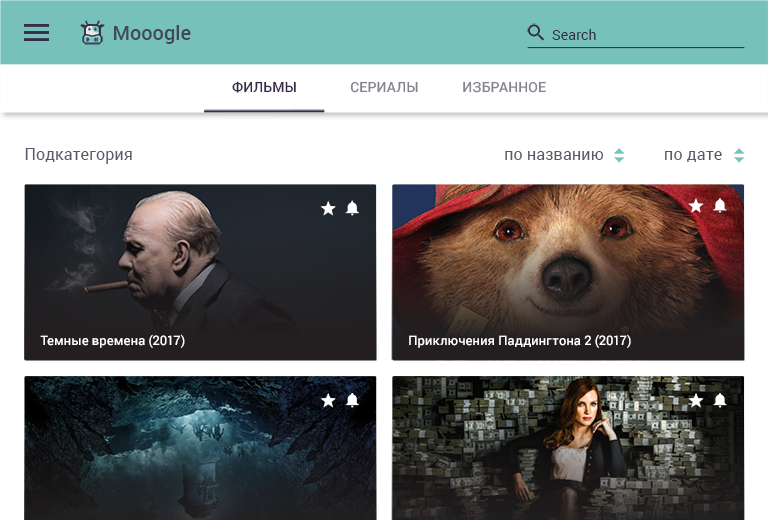
<style>
.page{position:relative;width:768px;height:520px;background:#ffffff}
.page>*{position:absolute;margin:0}
.t1{font:20px "Roboto-Medium";letter-spacing:0.005em;color:#41485b}
.t2{font:14px "Roboto-Regular";letter-spacing:0.01em;color:#372c48}
.t3{font:14px "Roboto-Medium";letter-spacing:0.01em;color:#372c48;text-transform:uppercase}
.t4{font:14px "Roboto-Medium";letter-spacing:0.01em;color:#86828e;text-transform:uppercase}
.t5{font:16px "Roboto-Regular";letter-spacing:0.005em;color:#5e576a}
.t6{font:16px "Roboto-Regular";letter-spacing:0.01em;color:#5e576a}
.t7{font:13px "Roboto-Medium";color:#ffffff}
</style>
<div class="page">
<p class="t1" style="left:114px;top:25px;width:77px;height:19px">Mooogle</p>
<p class="t2" style="left:552px;top:29px;width:44px;height:11px">Search</p>
<p class="t3" style="left:232px;top:81px;width:64px;height:12px">фильмы</p>
<p class="t4" style="left:350px;top:81px;width:68px;height:12px">сериалы</p>
<p class="t4" style="left:463px;top:81px;width:83px;height:12px">избранное</p>
<p class="t5" style="left:25px;top:148px;width:107px;height:16px">Подкатегория</p>
<p class="t6" style="left:505px;top:151px;width:99px;height:9px">по названию</p>
<p class="t6" style="left:665px;top:151px;width:57px;height:11px">по дате</p>
<p class="t7" style="left:40px;top:334px;width:145px;height:14px">Темные времена (2017)</p>
<p class="t7" style="left:409px;top:334px;width:222px;height:14px">Приключения Паддингтона 2 (2017)</p>
</div>
